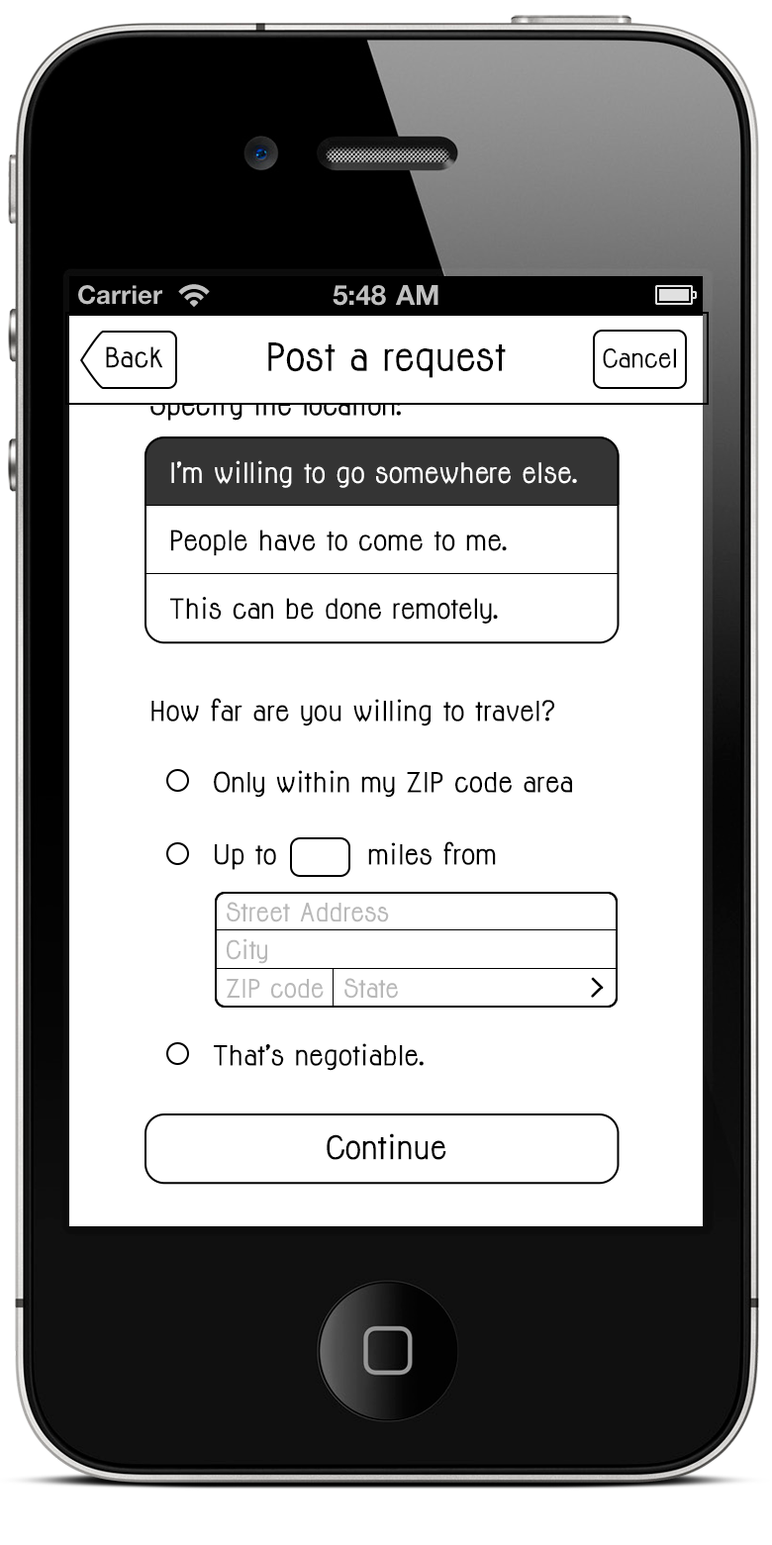
<style>
.page{position:relative;width:772px;height:1545px;background:#ffffff}
.page>*{position:absolute;margin:0}
.t1{font:25.7px "Jolly-Bold";color:#000000}
.t2{font:35.6px "Jolly-Bold";color:#000000}
.t3{font:23.8px "Jolly-Bold";color:#000000}
.t4{font:25.7px "Jolly-Bold";color:#ffffff}
.t5{font:25.5px "Jolly-Bold";color:#000000}
.t6{font:23.6px "Jolly-Bold";color:#b8b8b8}
.t7{font:29.8px "Jolly-Bold";color:#000000}
</style>
<div class="page">
<p class="t1" style="left:106px;top:346px;width:57px;height:22px">Back</p>
<p class="t2" style="left:268px;top:342px;width:238px;height:36px">Post a request</p>
<p class="t3" style="left:603px;top:348px;width:73px;height:20px">Cancel</p>
<p class="t4" style="left:171px;top:460px;width:406px;height:28px">I’m willing to go somewhere else.</p>
<p class="t1" style="left:171px;top:529px;width:336px;height:27px">People have to come to me.</p>
<p class="t1" style="left:170px;top:597px;width:328px;height:26px">This can be done remotely.</p>
<p class="t5" style="left:151px;top:698px;width:403px;height:28px">How far are you willing to travel?</p>
<p class="t5" style="left:214px;top:770px;width:358px;height:28px">Only within my ZIP code area</p>
<p class="t5" style="left:215px;top:841px;width:281px;height:29px">Up to         miles from</p>
<p class="t6" style="left:227px;top:902px;width:162px;height:20px">Street Address</p>
<p class="t6" style="left:227px;top:938px;width:40px;height:26px">City</p>
<p class="t6" style="left:344px;top:978px;width:54px;height:21px">State</p>
<p class="t6" style="left:227px;top:979px;width:97px;height:20px">ZIP code</p>
<p class="t5" style="left:214px;top:1043px;width:210px;height:28px">That’s negotiable.</p>
<p class="t7" style="left:327px;top:1133px;width:119px;height:27px">Continue</p>
</div>
